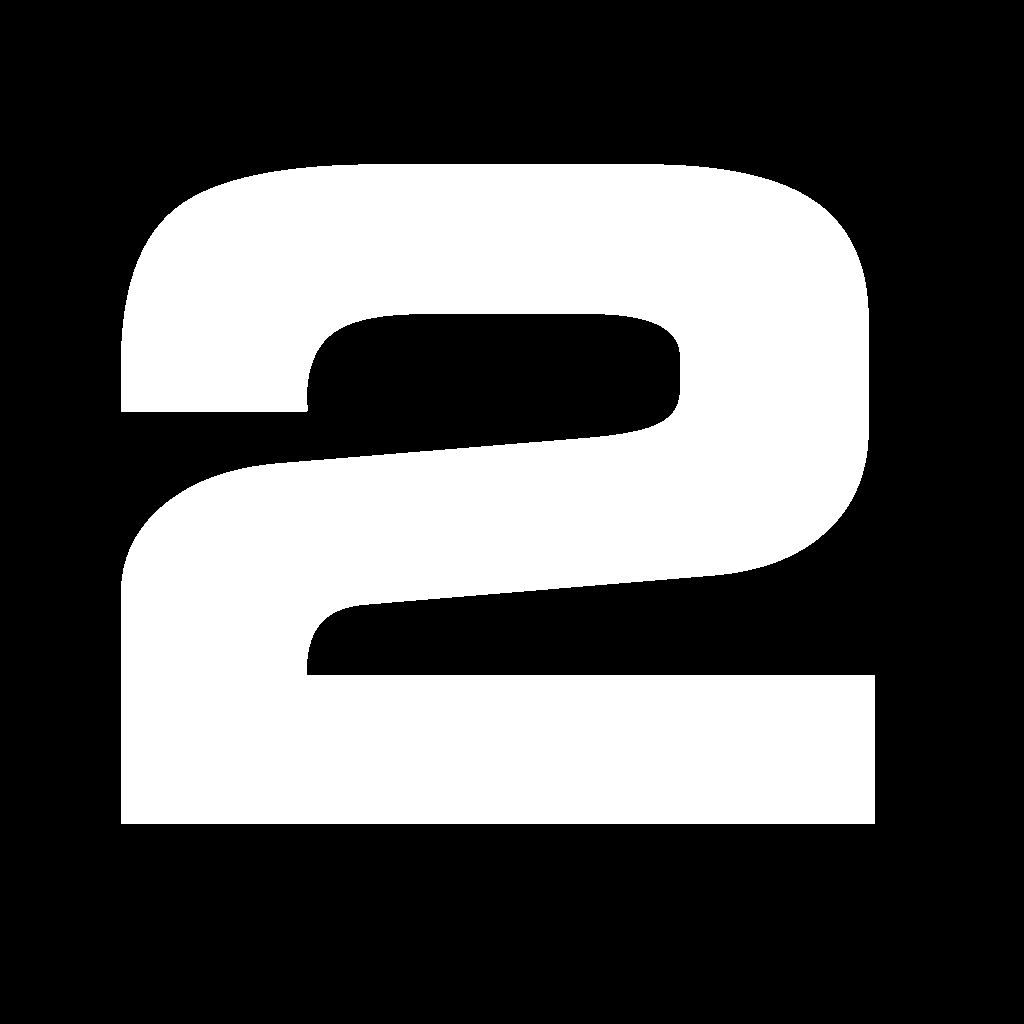
<style>
.page{position:relative;width:1024px;height:1024px;background:#000000}
.page>*{position:absolute;margin:0}
.t1{font:895.8px "Square721BT-BoldExtended";color:#ffffff}
</style>
<div class="page">
<p class="t1" style="left:121px;top:164px;width:754px;height:660px">2</p>
</div>
